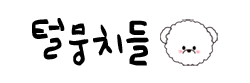
<style>
.page{position:relative;width:250px;height:83px;background:#ffffff}
.page>*{position:absolute;margin:0}
.t1{font:38px "UhBeeJJIBBABBA";letter-spacing:0.05em;color:#000000}
</style>
<div class="page">
<p class="t1" style="left:32px;top:18px;width:117px;height:48px">털뭉치들</p>
</div>
